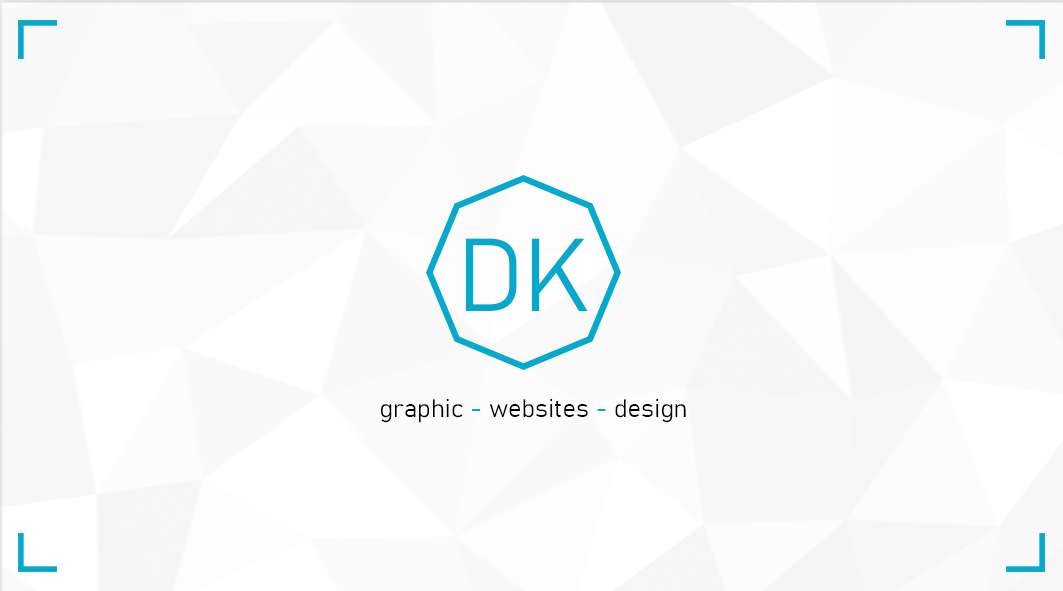
<style>
.page{position:relative;width:1063px;height:591px}
.page>*{position:absolute;margin:0}
.t1{font:102.3px "Bahnschrift-Light";color:#06a9cc}
.t2{font:25px "Bahnschrift-Light";color:#000000}
.t3{font:25px "Bahnschrift-Light";color:#06a9cc}
</style>
<div class="page">
<p class="t1" style="left:465px;top:238px;width:123px;height:73px">DK</p>
<p class="t2" style="left:381px;top:399px;width:305px;height:24px">graphic <span class="t3">-</span> websites <span class="t3">-</span> design</p>
</div>
